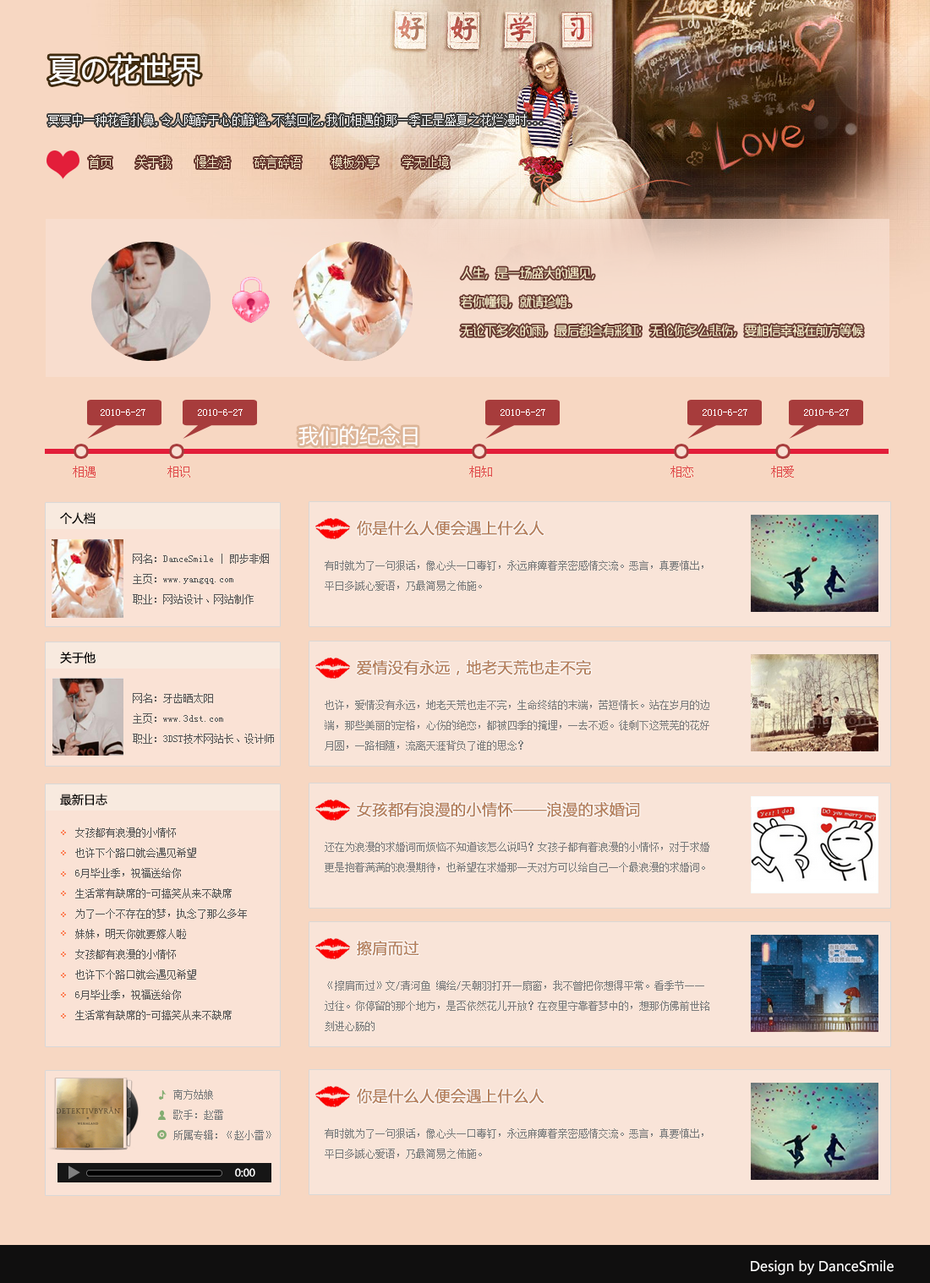
<style>
.page{position:relative;width:930px;height:1283px;background:#f7d7c2}
.page>*{position:absolute;margin:0}
.t1{font:30.4px "MicrosoftYaHei";color:#ffffff}
.t2{font:11.8px "SimSun";color:#ffffff}
.t3{font:11.8px "SimSun";color:#f6ecc9}
.t4{font:10.1px "SimSun";color:#ffffff}
.t5{font:20.3px "MicrosoftYaHei";color:#ffffff}
.t6{font:11.8px "SimSun";color:#e04b4b}
.t7{font:11.8px "MicrosoftYaHei";color:#000000}
.t8{font:15.2px "MicrosoftYaHei";color:#b6805c;font-weight:bold}
.t9{font:10.1px/20.3px "SimSun";color:#565656}
.t10{font:10.1px/20.3px "SimSun";color:#797b7c}
.t11{font:10.1px/20.3px "SimSun";color:#555555}
.t12{font:10.1px "MicrosoftYaHei";color:#fbfbfb}
.t13{font:13.5px "MicrosoftYaHei";color:#ffffff}
</style>
<div class="page">
<p class="t1" style="left:48px;top:54px;width:152px;height:31px">夏の花世界</p>
<p class="t2" style="left:48px;top:114px;width:494px;height:12px">冥冥中一种花香扑鼻,令人陶醉于心的静谧,不禁回忆,我们相遇的那一季正是盛夏之花烂漫时...</p>
<p class="t3" style="left:89px;top:156px;width:360px;height:12px">首页    关于我    慢生活    碎言碎语     模板分享    学无止境</p>
<p class="t4" style="left:101px;top:409px;width:44px;height:7px">2010-6-27</p>
<p class="t4" style="left:198px;top:409px;width:45px;height:7px">2010-6-27</p>
<p class="t4" style="left:500px;top:409px;width:45px;height:7px">2010-6-27</p>
<p class="t4" style="left:702px;top:409px;width:45px;height:7px">2010-6-27</p>
<p class="t4" style="left:804px;top:409px;width:44px;height:7px">2010-6-27</p>
<p class="t5" style="left:298px;top:426px;width:119px;height:20px">我们的纪念日</p>
<p class="t6" style="left:73px;top:466px;width:721px;height:11px">相遇            相识                                               相知                              相恋             相爱</p>
<p class="t7" style="left:60px;top:512px;width:35px;height:12px">个人档</p>
<p class="t8" style="left:357px;top:521px;width:187px;height:15px">你是什么人便会遇上什么人</p>
<p class="t9" style="left:133px;top:554px;width:136px;height:50px">网名：DanceSmile | 即步非烟<br>主页：www.yangqq.com<br>职业：网站设计、网站制作</p>
<p class="t10" style="left:325px;top:560px;width:378px;height:31px">有时就为了一句狠话，像心头一口毒钉，永远麻痺着亲密感情交流。恶言，真要慎出，平日多誠心爱语，乃最简易之佈施。</p>
<p class="t7" style="left:60px;top:652px;width:35px;height:11px">关于他</p>
<p class="t8" style="left:356px;top:660px;width:235px;height:15px">爱情没有永远，地老天荒也走不完</p>
<p class="t9" style="left:133px;top:693px;width:141px;height:51px">网名：牙齿晒太阳<br>主页：www.3dst.com<br>职业：3DST技术网站长、设计师</p>
<p class="t10" style="left:325px;top:700px;width:384px;height:50px">也许，爱情没有永远，地老天荒也走不完，生命终结的末端，苦短情长。站在岁月的边端，那些美丽的定格，心伤的绝恋，都被四季的掩埋，一去不返。徒剩下这荒芜的花好月圆，一路相随，流离天涯背负了谁的思念？</p>
<p class="t7" style="left:60px;top:794px;width:47px;height:11px">最新日志</p>
<p class="t8" style="left:357px;top:801px;width:283px;height:16px">女孩都有浪漫的小情怀——浪漫的求婚词</p>
<p class="t11" style="left:75px;top:827px;width:172px;height:193px">女孩都有浪漫的小情怀<br>也许下个路口就会遇见希望<br>6月毕业季，祝福送给你<br>生活常有缺席的-可搞笑从来不缺席<br>为了一个不存在的梦，执念了那么多年<br>妹妹，明天你就要嫁人啦<br>女孩都有浪漫的小情怀<br>也许下个路口就会遇见希望<br>6月毕业季，祝福送给你<br>生活常有缺席的-可搞笑从来不缺席</p>
<p class="t10" style="left:325px;top:842px;width:384px;height:30px">还在为浪漫的求婚词而烦恼不知道该怎么说吗？女孩子都有着浪漫的小情怀，对于求婚更是抱着满满的浪漫期待，也希望在求婚那一天对方可以给自己一个最浪漫的求婚词。</p>
<p class="t8" style="left:357px;top:941px;width:62px;height:15px">擦肩而过</p>
<p class="t10" style="left:325px;top:980px;width:384px;height:51px">《擦肩而过》文/清河鱼 编绘/天朝羽打开一扇窗，我不曾把你想得平常。看季节一一过往。你停留的那个地方，是否依然花儿开放？在夜里守靠着梦中的，想那仿佛前世铭刻进心肠的</p>
<p class="t10" style="left:173px;top:1089px;width:98px;height:51px">南方姑娘<br>歌手：赵雷<br>所属专辑：《赵小雷》</p>
<p class="t8" style="left:357px;top:1088px;width:187px;height:16px">你是什么人便会遇上什么人</p>
<p class="t10" style="left:325px;top:1128px;width:378px;height:31px">有时就为了一句狠话，像心头一口毒钉，永远麻痺着亲密感情交流。恶言，真要慎出，平日多誠心爱语，乃最简易之佈施。</p>
<p class="t12" style="left:235px;top:1168px;width:20px;height:9px">0:00</p>
<p class="t13" style="left:750px;top:1260px;width:143px;height:15px">Design by DanceSmile</p>
</div>
